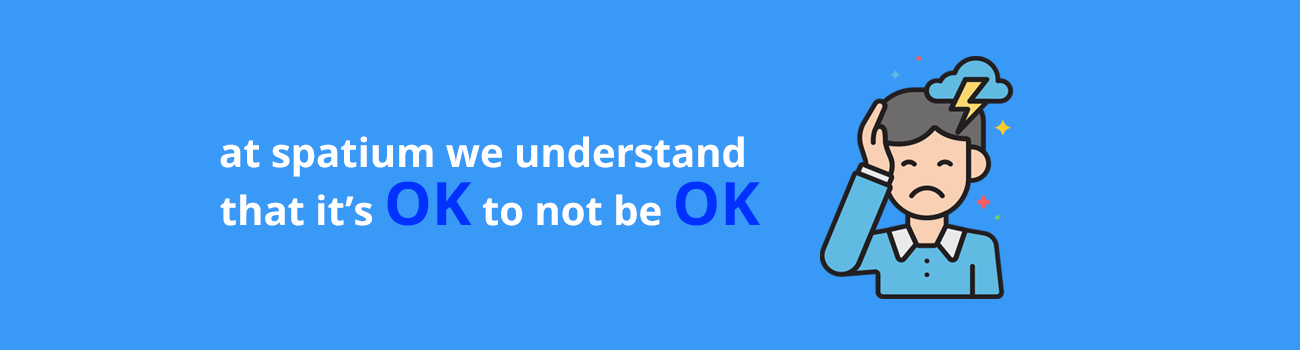
<style>
.page{position:relative;width:1300px;height:350px;background:#3999f7}
.page>*{position:absolute;margin:0}
.t1{font:40px "OpenSans-Bold";color:#ffffff}
.t2{font:60px "OpenSans-Bold";color:#0031ff}
</style>
<div class="page">
<p class="t1" style="left:220px;top:136px;width:524px;height:41px">at spatium we understand</p>
<p class="t1" style="left:220px;top:181px;width:540px;height:45px">that it’s <span class="t2">OK </span>to not be <span class="t2">OK</span></p>
</div>
